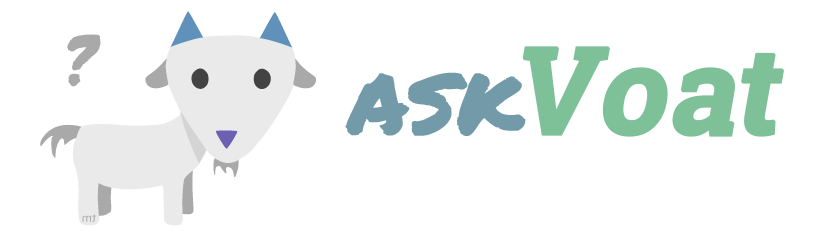
<style>
.page{position:relative;width:821px;height:252px;background:#ffffff}
.page>*{position:absolute;margin:0}
.t1{font:60.3px "PermanentMarker";color:#a9a9a9;font-weight:bold;font-style:italic}
.t2{font:120px "RobotoSlab-Bold";color:#7ec097;font-weight:bold;font-style:italic}
.t3{font:100px "PermanentMarker";color:#729aa9;font-weight:bold}
</style>
<div class="page">
<p class="t1" style="left:67px;top:34px;width:34px;height:53px;rotate:-15deg">?</p>
<p class="t2" style="left:522px;top:46px;width:262px;height:91px">Voat</p>
<p class="t3" style="left:345px;top:72px;width:181px;height:64px">ask</p>
</div>
